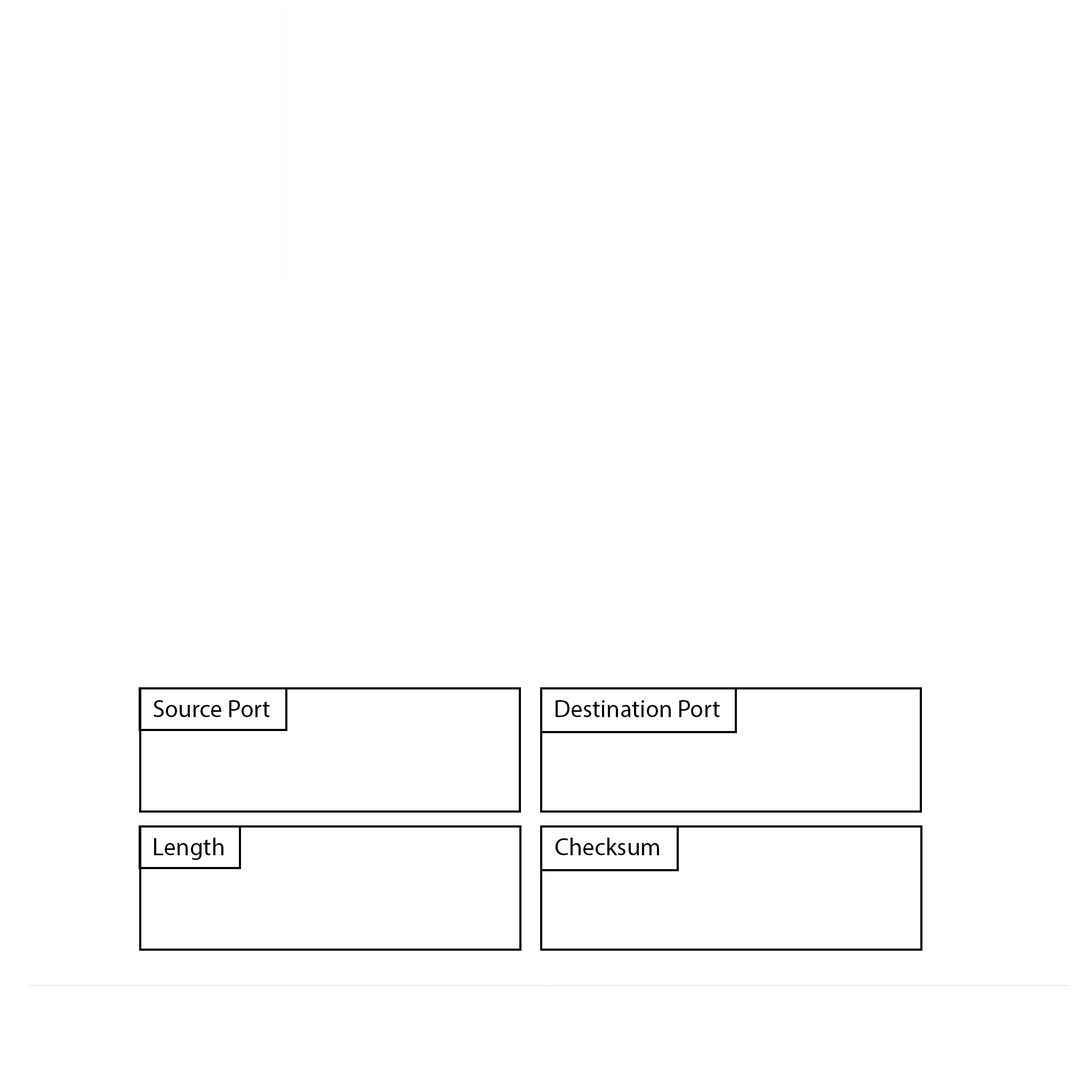
<style>
.page{position:relative;width:1092px;height:1092px;background:#ffffff}
.page>*{position:absolute;margin:0}
.t1{font:24.5px "MyriadPro-Regular";color:#000000}
</style>
<div class="page">
<p class="t1" style="left:154px;top:700px;width:116px;height:17px">Source Port</p>
<p class="t1" style="left:556px;top:700px;width:164px;height:17px">Destination Port</p>
<p class="t1" style="left:154px;top:838px;width:69px;height:22px">Length</p>
<p class="t1" style="left:555px;top:838px;width:104px;height:17px">Checksum</p>
</div>
